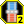
<style>
.page{position:relative;width:24px;height:24px}
.page>*{position:absolute;margin:0}
.t1{font:9px "Montserrat-Bold";color:#000000}
</style>
<div class="page">
<p class="t1" style="left:18px;top:16px;width:5px;height:7px">2</p>
</div>
